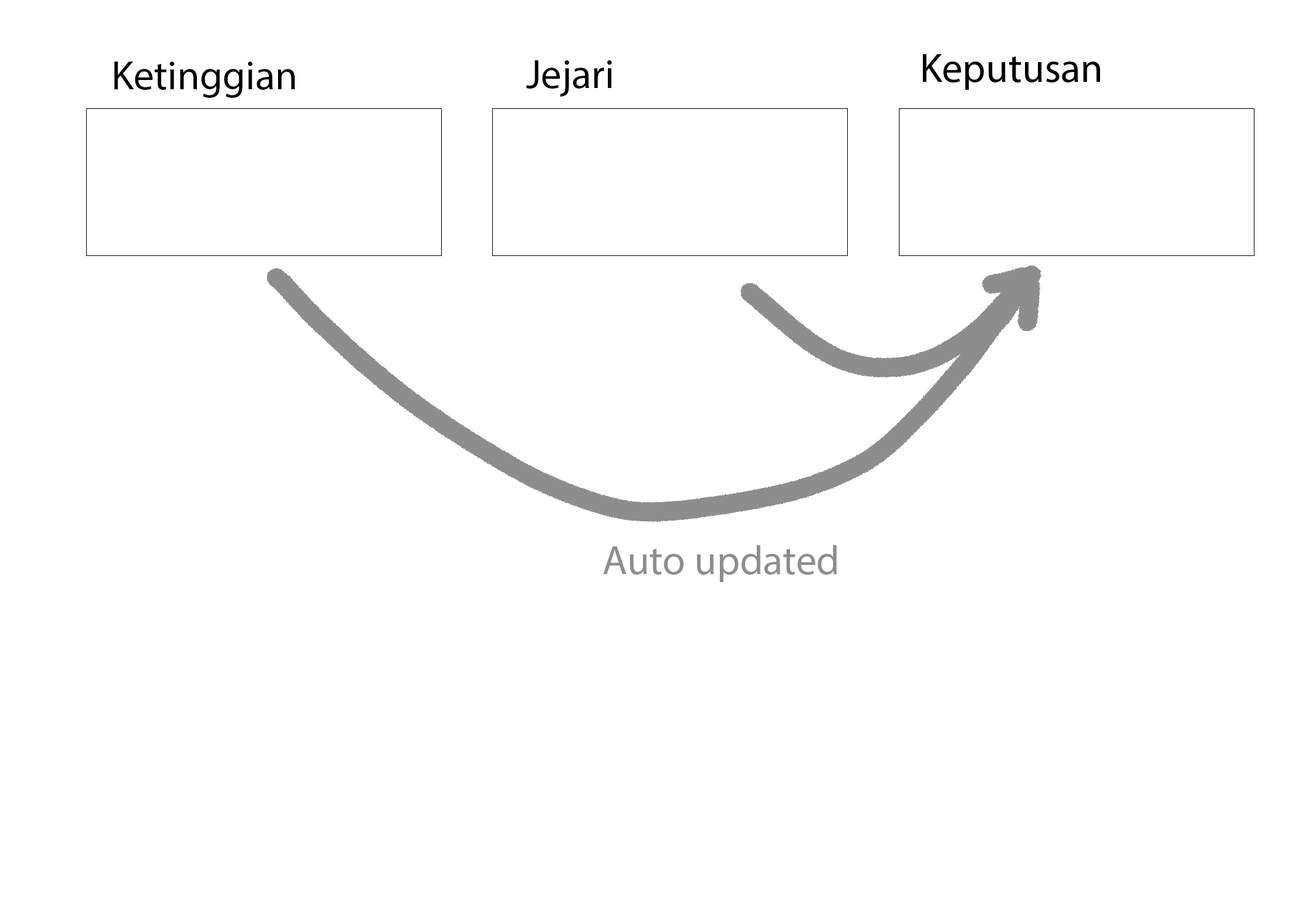
<style>
.page{position:relative;width:1292px;height:923px;background:#ffffff}
.page>*{position:absolute;margin:0}
.t1{font:41px "MyriadPro-Regular";color:#010000}
.t2{font:41px "MyriadPro-Regular";color:#8d8d8d}
</style>
<div class="page">
<p class="t1" style="left:114px;top:62px;width:181px;height:36px">Ketinggian</p>
<p class="t1" style="left:526px;top:60px;width:86px;height:37px">Jejari</p>
<p class="t2" style="left:603px;top:545px;width:234px;height:37px">Auto updated</p>
</div>
